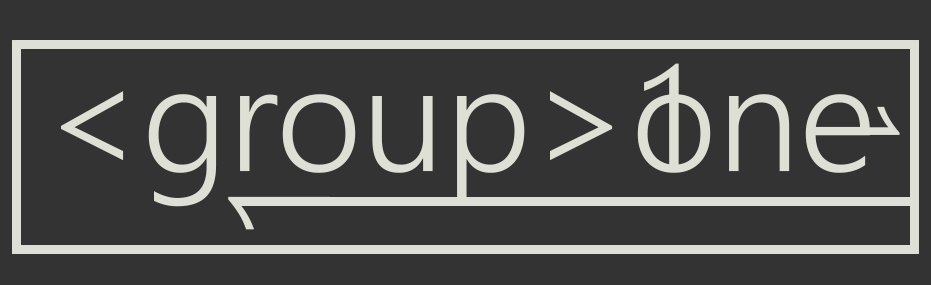
<style>
.page{position:relative;width:931px;height:285px;background:#333333}
.page>*{position:absolute;margin:0}
.t1{font:150px "NirmalaUI-Semilight";color:#dedfd5}
.t2{font:122.6px "NirmalaUI-Semilight";color:#dedfd5}
.t3{font:141.8px "NirmalaUI-Semilight";color:#dedfd5}
</style>
<div class="page">
<p class="t1" style="left:644px;top:63px;width:35px;height:108px">1</p>
<p class="t1" style="left:61px;top:91px;width:809px;height:116px">&lt;group&gt;one</p>
<p class="t2" style="left:811px;top:106px;width:89px;height:29px;rotate:90deg">1</p>
<p class="t3" style="left:228px;top:196px;width:102px;height:34px;rotate:-90deg">1</p>
</div>
